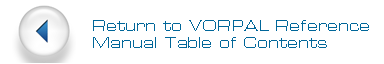
<style>
.page{position:relative;width:384px;height:64px;background:#ffffff}
.page>*{position:absolute;margin:0}
.t1{font:14px "EurostileLTStd-Ex2";color:#006699}
</style>
<div class="page">
<p class="t1" style="left:93px;top:20px;width:276px;height:28px">Return to VORPAL Reference <br>Manual Table of Contents</p>
</div>
